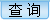
<style>
.page{position:relative;width:50px;height:20px}
.page>*{position:absolute;margin:0}
.t1{font:14px "SimSun";letter-spacing:0.3em;color:#000000}
</style>
<div class="page">
<p class="t1" style="left:9px;top:3px;width:31px;height:14px">查询</p>
</div>
